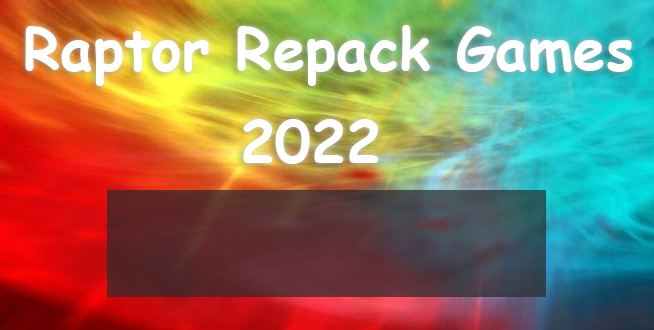
<style>
.page{position:relative;width:654px;height:330px}
.page>*{position:absolute;margin:0}
.t1{font:58.3px "ComicSansMS-Bold";color:#ffffff}
</style>
<div class="page">
<p class="t1" style="left:25px;top:25px;width:608px;height:61px">Raptor Repack Games</p>
<p class="t1" style="left:243px;top:119px;width:136px;height:45px">2022</p>
</div>
